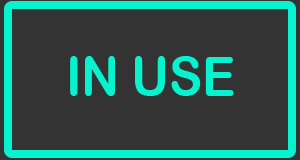
<style>
.page{position:relative;width:300px;height:160px;background:#333333}
.page>*{position:absolute;margin:0}
.t1{font:55px "ArialRoundedMTBold";color:#07f3cf;scale:0.9 1}
</style>
<div class="page">
<p class="t1" style="left:70px;top:56px;width:164px;height:40px">IN USE</p>
</div>
